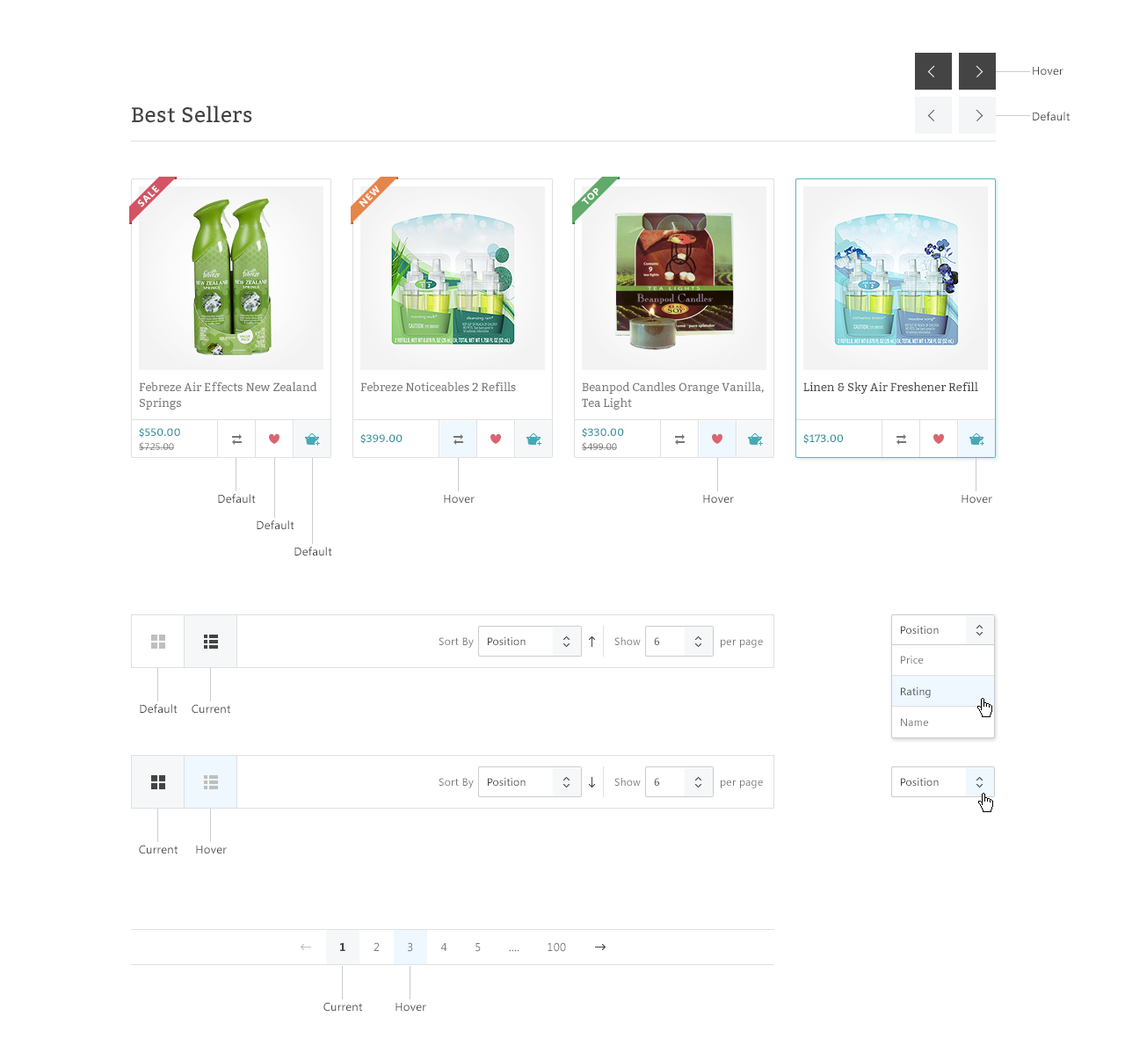
<style>
.page{position:relative;width:1125px;height:1060px;background:#ffffff}
.page>*{position:absolute;margin:0}
.t1{font:11.4px "SegoeUI";letter-spacing:0.025em;color:#444444}
.t2{font:21.1px "Bitter-Regular";letter-spacing:0.025em;color:#444444}
.t3{font:9.7px "SegoeUI-Bold";letter-spacing:0.1em;color:#ffffff;text-transform:uppercase}
.t4{font:11.4px/15.8px "Bitter-Regular";color:#777777}
.t5{font:11.4px "Bitter-Regular";color:#777777}
.t6{font:11.4px "Bitter-Regular";color:#444444}
.t7{font:10.5px "Bitter-Regular";letter-spacing:0.025em;color:#2e8f9a}
.t8{font:9.7px "SegoeUI";letter-spacing:0.025em;color:#777777}
.t9{font:10.5px "SegoeUI";letter-spacing:0.025em;color:#444444}
.t10{font:10.5px "SegoeUI";letter-spacing:0.025em;color:#777777}
.t11{font:11.4px "SegoeUI";letter-spacing:0.025em;color:#777777}
.t12{font:11.4px "SegoeUI-Bold";letter-spacing:0.025em;color:#444444}
</style>
<div class="page">
<p class="t1" style="left:1033px;top:67px;width:30px;height:9px">Hover</p>
<p class="t2" style="left:132px;top:105px;width:120px;height:18px">Best Sellers</p>
<p class="t1" style="left:1033px;top:112px;width:37px;height:9px">Default</p>
<p class="t3" style="left:137px;top:185px;width:23px;height:22px;rotate:-45deg">sale</p>
<p class="t3" style="left:359px;top:185px;width:21px;height:22px;rotate:-45deg">NEW</p>
<p class="t3" style="left:581px;top:188px;width:18px;height:17px;rotate:-45deg">TOP</p>
<p class="t4" style="left:139px;top:381px;width:178px;height:29px">Febreze Air Effects New Zealand Springs</p>
<p class="t5" style="left:360px;top:381px;width:156px;height:10px">Febreze Noticeables 2 Refills</p>
<p class="t4" style="left:582px;top:381px;width:182px;height:29px">Beanpod Candles Orange Vanilla, Tea Light</p>
<p class="t6" style="left:803px;top:381px;width:175px;height:13px">Linen &amp; Sky Air Freshener Refill</p>
<p class="t7" style="left:139px;top:428px;width:41px;height:10px">$550.00</p>
<p class="t7" style="left:360px;top:434px;width:43px;height:10px">$399.00</p>
<p class="t7" style="left:582px;top:428px;width:42px;height:10px">$330.00</p>
<p class="t7" style="left:803px;top:434px;width:40px;height:10px">$173.00</p>
<p class="t8" style="left:139px;top:442px;width:35px;height:9px">$725.00</p>
<p class="t8" style="left:582px;top:442px;width:35px;height:9px">$499.00</p>
<p class="t1" style="left:218px;top:494px;width:38px;height:10px">Default</p>
<p class="t1" style="left:444px;top:495px;width:31px;height:9px">Hover</p>
<p class="t1" style="left:703px;top:495px;width:31px;height:9px">Hover</p>
<p class="t1" style="left:962px;top:495px;width:30px;height:9px">Hover</p>
<p class="t1" style="left:257px;top:520px;width:37px;height:10px">Default</p>
<p class="t1" style="left:294px;top:547px;width:38px;height:9px">Default</p>
<p class="t9" style="left:901px;top:626px;width:38px;height:8px">Position</p>
<p class="t10" style="left:439px;top:637px;width:35px;height:11px">Sort By</p>
<p class="t9" style="left:488px;top:637px;width:38px;height:8px">Position</p>
<p class="t10" style="left:614px;top:637px;width:27px;height:8px">Show</p>
<p class="t9" style="left:654px;top:637px;width:5px;height:8px">6</p>
<p class="t10" style="left:721px;top:639px;width:42px;height:9px">per page</p>
<p class="t10" style="left:901px;top:656px;width:23px;height:8px">Price</p>
<p class="t9" style="left:901px;top:687px;width:30px;height:11px">Rating</p>
<p class="t1" style="left:140px;top:704px;width:38px;height:10px">Default</p>
<p class="t1" style="left:192px;top:704px;width:38px;height:10px">Current</p>
<p class="t10" style="left:901px;top:718px;width:27px;height:8px">Name</p>
<p class="t10" style="left:439px;top:778px;width:35px;height:10px">Sort By</p>
<p class="t9" style="left:488px;top:778px;width:38px;height:8px">Position</p>
<p class="t10" style="left:614px;top:778px;width:27px;height:8px">Show</p>
<p class="t9" style="left:654px;top:778px;width:5px;height:8px">6</p>
<p class="t10" style="left:721px;top:780px;width:42px;height:8px">per page</p>
<p class="t9" style="left:901px;top:778px;width:38px;height:8px">Position</p>
<p class="t1" style="left:139px;top:845px;width:39px;height:9px">Current</p>
<p class="t1" style="left:196px;top:845px;width:31px;height:9px">Hover</p>
<p class="t11" style="left:340px;top:942px;width:226px;height:10px"><span class="t12">1</span>        2        3        4        5        ....        100</p>
<p class="t1" style="left:323px;top:1002px;width:39px;height:10px">Current</p>
<p class="t1" style="left:396px;top:1003px;width:30px;height:9px">Hover</p>
</div>
